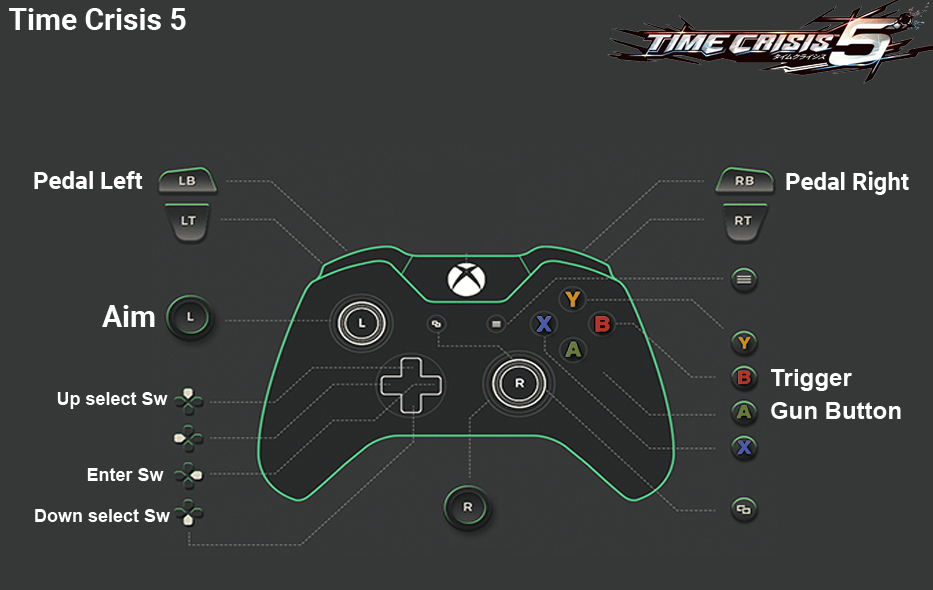
<style>
.page{position:relative;width:933px;height:590px;background:#363838}
.page>*{position:absolute;margin:0}
.t1{font:30px "Roboto-Bold";color:#ffffff}
.t2{font:24px "Roboto-Bold";color:#ffffff}
.t3{font:30px "Roboto-Bold";color:#fefefe}
.t4{font:24px "Arial-BoldMT";color:#fefefe}
.t5{font:18px "Arial-BoldMT";color:#fefefe}
</style>
<div class="page">
<p class="t1" style="left:9px;top:8px;width:177px;height:22px">Time Crisis 5</p>
<p class="t2" style="left:34px;top:171px;width:109px;height:18px">Pedal Left</p>
<p class="t2" style="left:786px;top:171px;width:123px;height:24px">Pedal Right</p>
<p class="t3" style="left:102px;top:305px;width:53px;height:22px">Aim</p>
<p class="t4" style="left:771px;top:369px;width:81px;height:22px">Trigger</p>
<p class="t5" style="left:57px;top:392px;width:111px;height:17px">Up select Sw</p>
<p class="t4" style="left:771px;top:402px;width:130px;height:17px">Gun Button</p>
<p class="t5" style="left:87px;top:468px;width:77px;height:13px">Enter Sw</p>
<p class="t5" style="left:35px;top:509px;width:135px;height:13px">Down select Sw</p>
</div>
